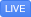
<style>
.page{position:relative;width:31px;height:17px}
.page>*{position:absolute;margin:0}
.t1{font:15px "KittithadaRoman55";color:#ffffff}
</style>
<div class="page">
<p class="t1" style="left:5px;top:5px;width:20px;height:7px">LIVE</p>
</div>
